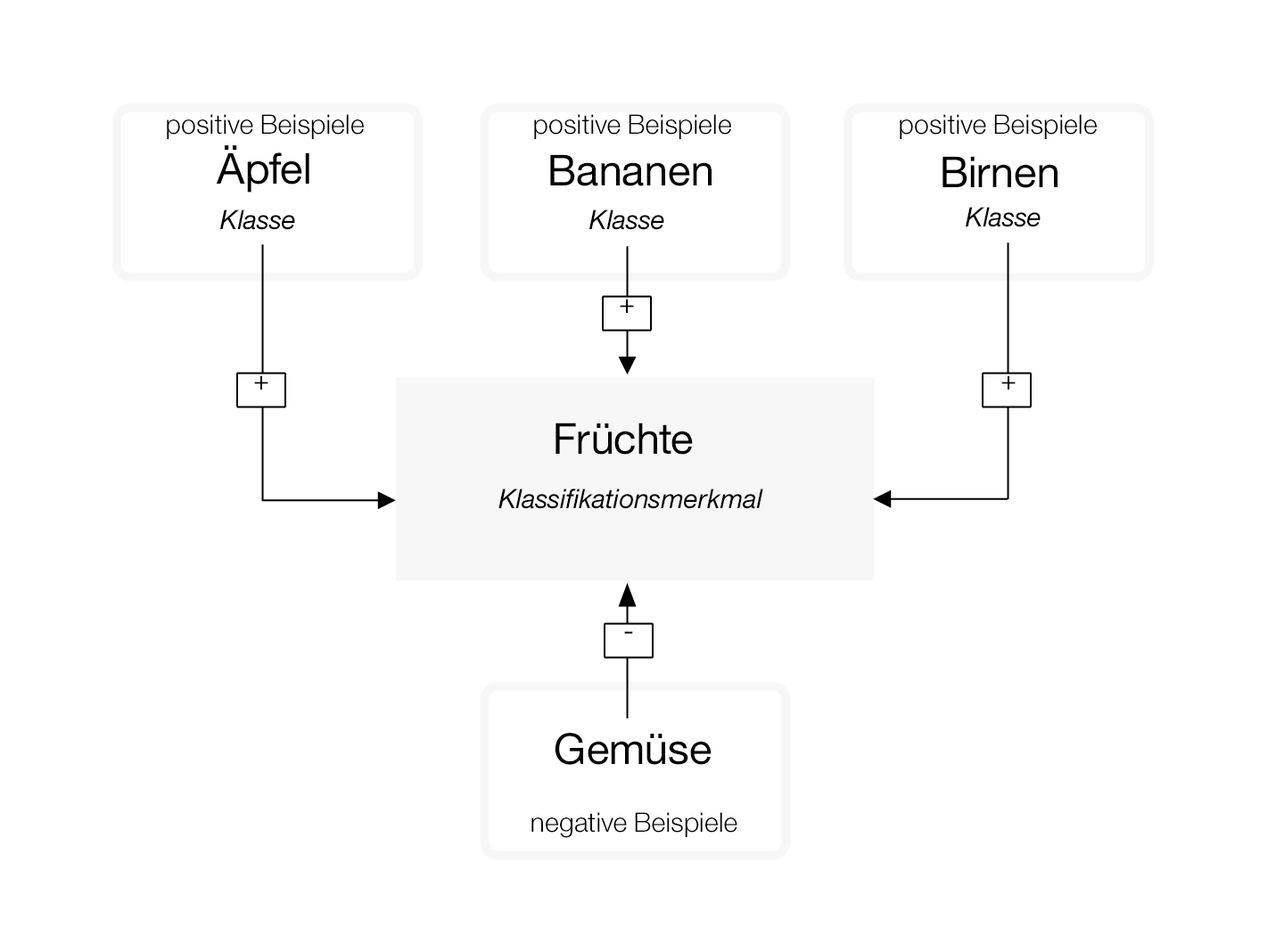
<style>
.page{position:relative;width:1284px;height:928px;background:#ffffff}
.page>*{position:absolute;margin:0}
.t1{font:26.8px "HelvNeueforIBM-Light";color:#000000}
.t2{font:42.8px "HelvNeueforIBM";color:#000000}
.t3{font:26.8px "HelvNeueforIBM-Italic";color:#000000}
.t4{font:26.8px "HelvNeueforIBM";color:#000000}
</style>
<div class="page">
<p class="t1" style="left:167px;top:114px;width:197px;height:25px">positive Beispiele</p>
<p class="t1" style="left:534px;top:114px;width:197px;height:25px">positive Beispiele</p>
<p class="t1" style="left:900px;top:114px;width:197px;height:25px">positive Beispiele</p>
<p class="t2" style="left:216px;top:145px;width:93px;height:48px">Äpfel</p>
<p class="t2" style="left:550px;top:154px;width:162px;height:32px">Bananen</p>
<p class="t2" style="left:943px;top:156px;width:115px;height:32px">Birnen</p>
<p class="t3" style="left:220px;top:210px;width:75px;height:20px">Klasse</p>
<p class="t3" style="left:590px;top:210px;width:74px;height:20px">Klasse</p>
<p class="t3" style="left:966px;top:207px;width:75px;height:20px">Klasse</p>
<p class="t4" style="left:620px;top:299px;width:14px;height:14px">+</p>
<p class="t4" style="left:254px;top:375px;width:14px;height:15px">+</p>
<p class="t4" style="left:1002px;top:375px;width:14px;height:15px">+</p>
<p class="t2" style="left:556px;top:423px;width:137px;height:32px">Früchte</p>
<p class="t3" style="left:499px;top:489px;width:264px;height:20px">Klassifikationsmerkmal</p>
<p class="t4" style="left:624px;top:631px;width:9px;height:3px">-</p>
<p class="t2" style="left:555px;top:733px;width:157px;height:32px">Gemüse</p>
<p class="t1" style="left:532px;top:813px;width:206px;height:25px">negative Beispiele</p>
</div>
